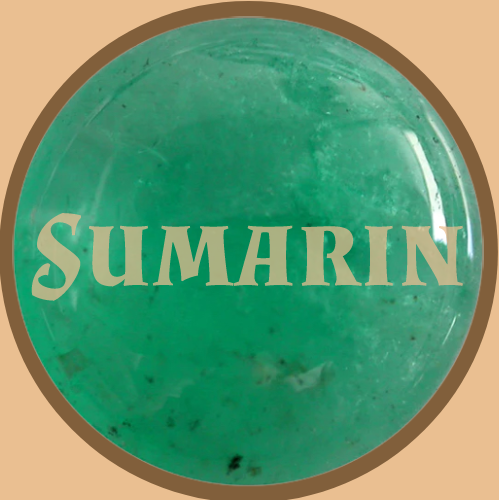
<style>
.page{position:relative;width:499px;height:500px;background:#eabf91}
.page>*{position:absolute;margin:0}
.t1{font:108px "AlmendraSC-Bold";color:#b0b486}
</style>
<div class="page">
<p class="t1" style="left:31px;top:213px;width:432px;height:88px">Sumarin</p>
</div>
